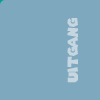
<style>
.page{position:relative;width:100px;height:100px;background:#7ea8be}
.page>*{position:absolute;margin:0}
.t1{font:13.9px "SuperMarioGalaxy";color:#c5d6e0}
</style>
<div class="page">
<p class="t1" style="left:67px;top:18px;width:11px;height:65px;rotate:-90deg">uitgang</p>
</div>
